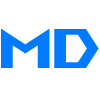
<style>
.page{position:relative;width:100px;height:100px;background:#ffffff}
.page>*{position:absolute;margin:0}
.t1{font:56.2px "ROGFonts-Regular";color:#007bff}
</style>
<div class="page">
<p class="t1" style="left:1px;top:28px;width:98px;height:40px">MD</p>
</div>
